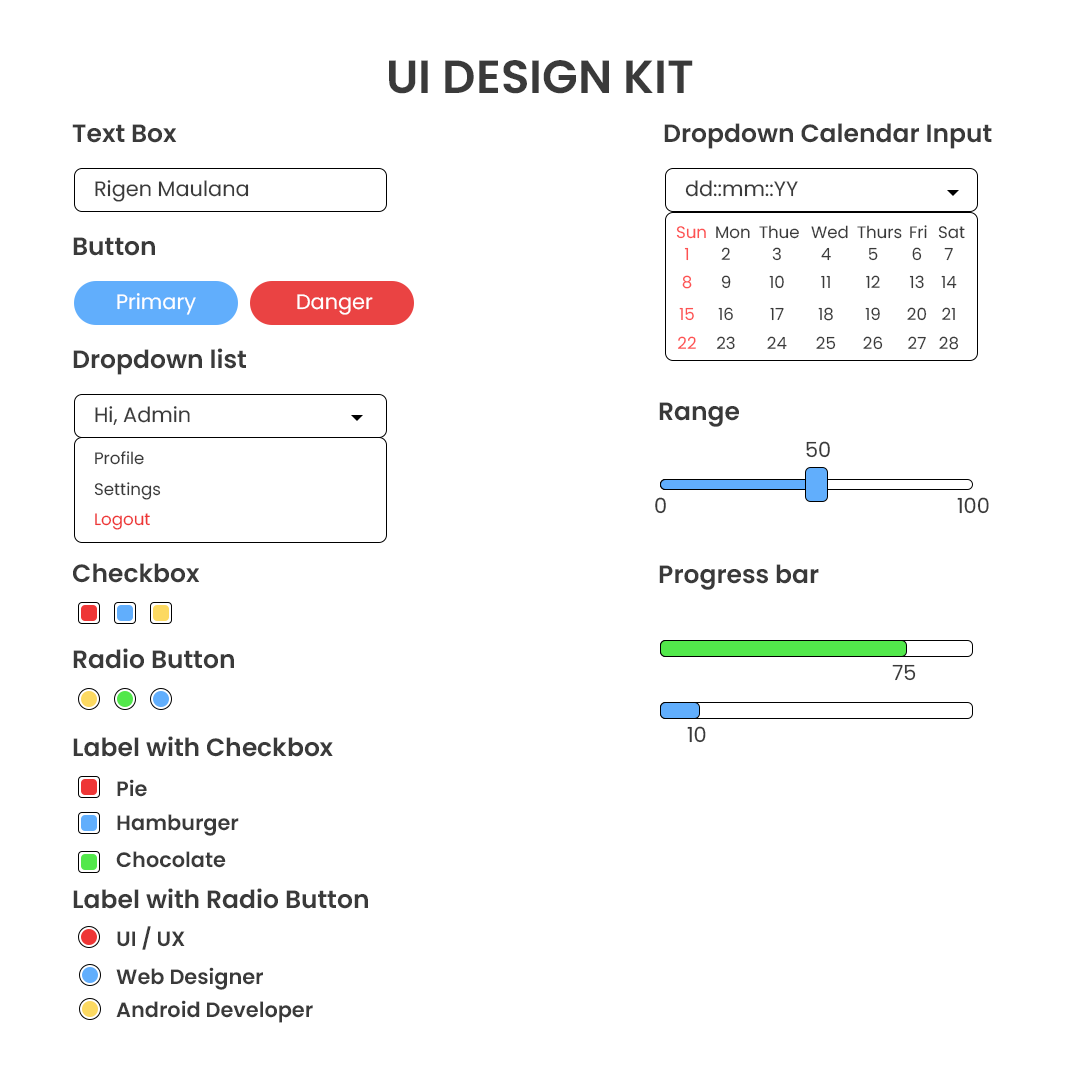
<style>
.page{position:relative;width:1080px;height:1080px;background:#ffffff}
.page>*{position:absolute;margin:0}
.t1{font:46.5px "Poppins-SemiBold";color:#3a3a3a}
.t2{font:25px "Poppins-SemiBold";color:#3a3a3a}
.t3{font:20.8px "Poppins-Regular";color:#3a3a3a}
.t4{font:16.7px "Poppins-Regular";color:#fd5252}
.t5{font:16.7px "Poppins-Regular";color:#3a3a3a}
.t6{font:20.8px "Poppins-Regular";color:#ffffff}
.t7{font:16.7px "Poppins-Regular";color:#ee3636}
.t8{font:20.8px "Poppins-SemiBold";color:#3a3a3a}
</style>
<div class="page">
<p class="t1" style="left:389px;top:60px;width:304px;height:34px">UI DESIGN KIT</p>
<p class="t2" style="left:72px;top:124px;width:105px;height:19px">Text Box</p>
<p class="t2" style="left:664px;top:123px;width:328px;height:26px">Dropdown Calendar Input</p>
<p class="t3" style="left:95px;top:180px;width:154px;height:22px">Rigen Maulana</p>
<p class="t3" style="left:685px;top:180px;width:113px;height:17px">dd::mm::YY</p>
<p class="t4" style="left:676px;top:226px;width:30px;height:13px">Sun</p>
<p class="t5" style="left:716px;top:226px;width:34px;height:13px">Mon</p>
<p class="t5" style="left:759px;top:225px;width:40px;height:14px">Thue</p>
<p class="t5" style="left:811px;top:225px;width:37px;height:14px">Wed</p>
<p class="t5" style="left:857px;top:225px;width:45px;height:14px">Thurs</p>
<p class="t5" style="left:910px;top:225px;width:17px;height:14px">Fri</p>
<p class="t5" style="left:938px;top:226px;width:27px;height:13px">Sat</p>
<p class="t2" style="left:73px;top:237px;width:82px;height:19px">Button</p>
<p class="t4" style="left:684px;top:247px;width:5px;height:14px">1</p>
<p class="t5" style="left:721px;top:247px;width:9px;height:13px">2</p>
<p class="t5" style="left:772px;top:247px;width:9px;height:14px">3</p>
<p class="t5" style="left:821px;top:247px;width:10px;height:14px">4</p>
<p class="t5" style="left:869px;top:247px;width:9px;height:14px">5</p>
<p class="t5" style="left:912px;top:247px;width:10px;height:14px">6</p>
<p class="t5" style="left:944px;top:247px;width:9px;height:14px">7</p>
<p class="t4" style="left:682px;top:275px;width:10px;height:14px">8</p>
<p class="t5" style="left:721px;top:275px;width:10px;height:14px">9</p>
<p class="t5" style="left:769px;top:275px;width:15px;height:14px">10</p>
<p class="t5" style="left:821px;top:275px;width:9px;height:14px">11</p>
<p class="t5" style="left:866px;top:275px;width:14px;height:14px">12</p>
<p class="t5" style="left:909px;top:275px;width:15px;height:14px">13</p>
<p class="t5" style="left:941px;top:275px;width:16px;height:14px">14</p>
<p class="t6" style="left:117px;top:293px;width:79px;height:22px">Primary</p>
<p class="t6" style="left:297px;top:294px;width:76px;height:21px">Danger</p>
<p class="t4" style="left:679px;top:307px;width:15px;height:14px">15</p>
<p class="t5" style="left:718px;top:307px;width:15px;height:14px">16</p>
<p class="t5" style="left:770px;top:307px;width:14px;height:14px">17</p>
<p class="t5" style="left:818px;top:307px;width:15px;height:14px">18</p>
<p class="t5" style="left:865px;top:307px;width:15px;height:14px">19</p>
<p class="t5" style="left:907px;top:307px;width:20px;height:14px">20</p>
<p class="t5" style="left:942px;top:307px;width:13px;height:13px">21</p>
<p class="t4" style="left:678px;top:336px;width:18px;height:13px">22</p>
<p class="t5" style="left:717px;top:336px;width:18px;height:14px">23</p>
<p class="t5" style="left:767px;top:336px;width:20px;height:13px">24</p>
<p class="t5" style="left:816px;top:336px;width:20px;height:14px">25</p>
<p class="t5" style="left:863px;top:336px;width:20px;height:14px">26</p>
<p class="t5" style="left:908px;top:336px;width:18px;height:14px">27</p>
<p class="t5" style="left:939px;top:336px;width:20px;height:14px">28</p>
<p class="t2" style="left:73px;top:348px;width:173px;height:27px">Dropdown list</p>
<p class="t3" style="left:95px;top:406px;width:95px;height:19px">Hi, Admin</p>
<p class="t2" style="left:659px;top:402px;width:80px;height:25px">Range</p>
<p class="t3" style="left:806px;top:441px;width:24px;height:17px">50</p>
<p class="t5" style="left:95px;top:451px;width:49px;height:14px">Profile</p>
<p class="t5" style="left:94px;top:482px;width:67px;height:18px">Settings</p>
<p class="t3" style="left:655px;top:497px;width:11px;height:17px">0</p>
<p class="t3" style="left:957px;top:497px;width:32px;height:17px">100</p>
<p class="t7" style="left:95px;top:513px;width:55px;height:17px">Logout</p>
<p class="t2" style="left:73px;top:563px;width:127px;height:20px">Checkbox</p>
<p class="t2" style="left:659px;top:564px;width:160px;height:26px">Progress bar</p>
<p class="t2" style="left:73px;top:648px;width:161px;height:21px">Radio Button</p>
<p class="t3" style="left:892px;top:664px;width:24px;height:17px">75</p>
<p class="t3" style="left:687px;top:726px;width:19px;height:17px">10</p>
<p class="t2" style="left:73px;top:736px;width:260px;height:21px">Label with Checkbox</p>
<p class="t8" style="left:117px;top:779px;width:30px;height:18px">Pie</p>
<p class="t8" style="left:117px;top:814px;width:122px;height:22px">Hamburger</p>
<p class="t8" style="left:116px;top:851px;width:110px;height:17px">Chocolate</p>
<p class="t2" style="left:73px;top:888px;width:295px;height:21px">Label with Radio Button</p>
<p class="t8" style="left:117px;top:926px;width:68px;height:24px">UI / UX</p>
<p class="t8" style="left:116px;top:967px;width:147px;height:23px">Web Designer</p>
<p class="t8" style="left:116px;top:1000px;width:197px;height:23px">Android Developer</p>
</div>
